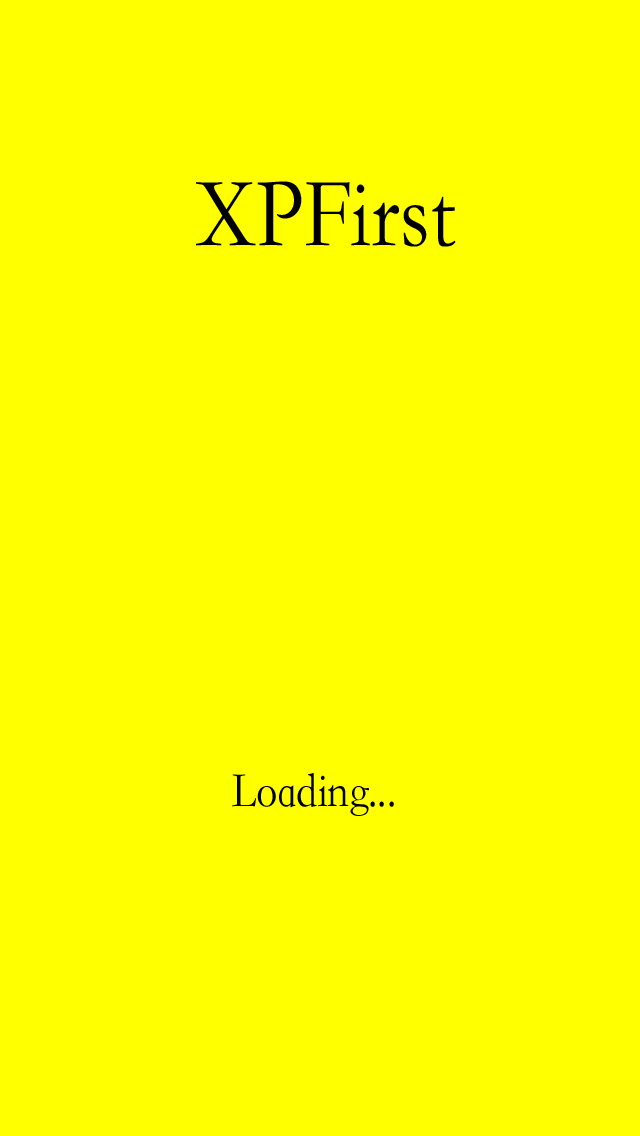
<style>
.page{position:relative;width:640px;height:1136px;background:#ffff00}
.page>*{position:absolute;margin:0}
.t1{font:100px "STFangsong";color:#000000;scale:0.85 1}
.t2{font:50px "STFangsong";color:#010000;scale:0.85 1}
</style>
<div class="page">
<p class="t1" style="left:196px;top:181px;width:260px;height:66px">XPFirst</p>
<p class="t2" style="left:232px;top:773px;width:162px;height:43px">Loading...</p>
</div>
